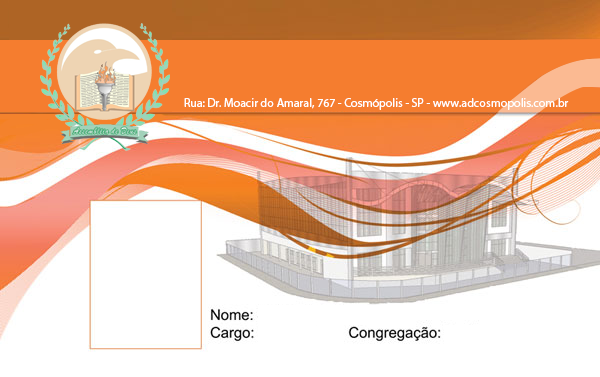
<style>
.page{position:relative;width:600px;height:377px;background:#ffffff}
.page>*{position:absolute;margin:0}
.t1{font:12px "MyriadPro-Regular";color:#ffffff}
</style>
<div class="page">
<p class="t1" style="left:184px;top:98px;width:385px;height:12px">Rua: Dr. Moacir do Amaral, 767 - Cosmópolis - SP - www.adcosmopolis.com.br</p>
</div>
